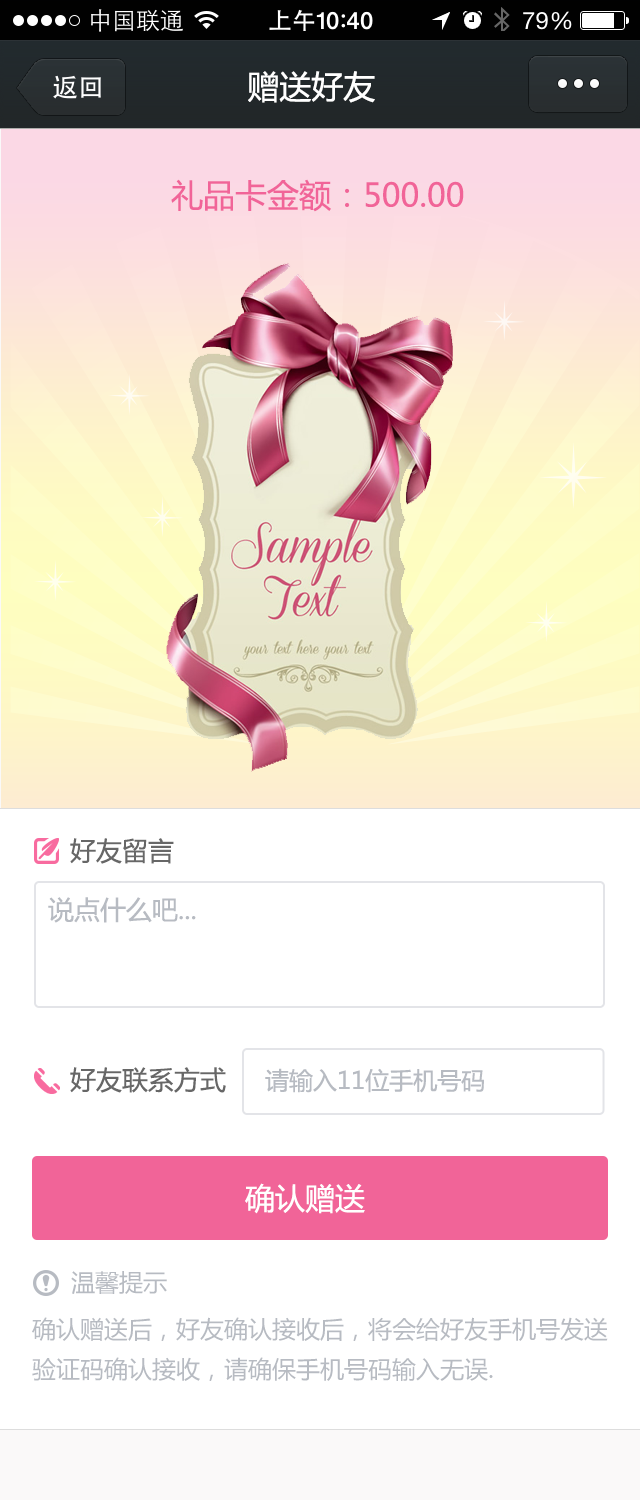
<style>
.page{position:relative;width:640px;height:1500px;background:#ffffff}
.page>*{position:absolute;margin:0}
.t1{font:32px "MicrosoftYaHei";color:#ffffff}
.t2{font:32px "MicrosoftYaHei";color:#f16498}
.t3{font:26px "MicrosoftYaHei";color:#676767}
.t4{font:26px "MicrosoftYaHei";color:#b7bbc2}
.t5{font:24px "MicrosoftYaHei";color:#b7bbc2}
.t6{font:30px "MicrosoftYaHei";color:#ffffff}
.t7{font:24px/40px "MicrosoftYaHei";color:#b7bbc2}
</style>
<div class="page">
<p class="t1" style="left:248px;top:71px;width:127px;height:32px">赠送好友</p>
<p class="t2" style="left:171px;top:179px;width:293px;height:33px">礼品卡金额：500.00元</p>
<p class="t3" style="left:70px;top:838px;width:104px;height:26px">好友留言</p>
<p class="t4" style="left:48px;top:897px;width:148px;height:26px">说点什么吧...</p>
<p class="t3" style="left:70px;top:1067px;width:156px;height:26px">好友联系方式</p>
<p class="t5" style="left:265px;top:1068px;width:219px;height:25px">请输入11位手机号码</p>
<p class="t6" style="left:245px;top:1183px;width:120px;height:31px">确认赠送</p>
<p class="t5" style="left:71px;top:1271px;width:96px;height:23px">温馨提示</p>
<p class="t7" style="left:32px;top:1317px;width:576px;height:64px">确认赠送后，好友确认接收后，将会给好友手机号发送验证码确认接收，请确保手机号码输入无误.</p>
</div>
